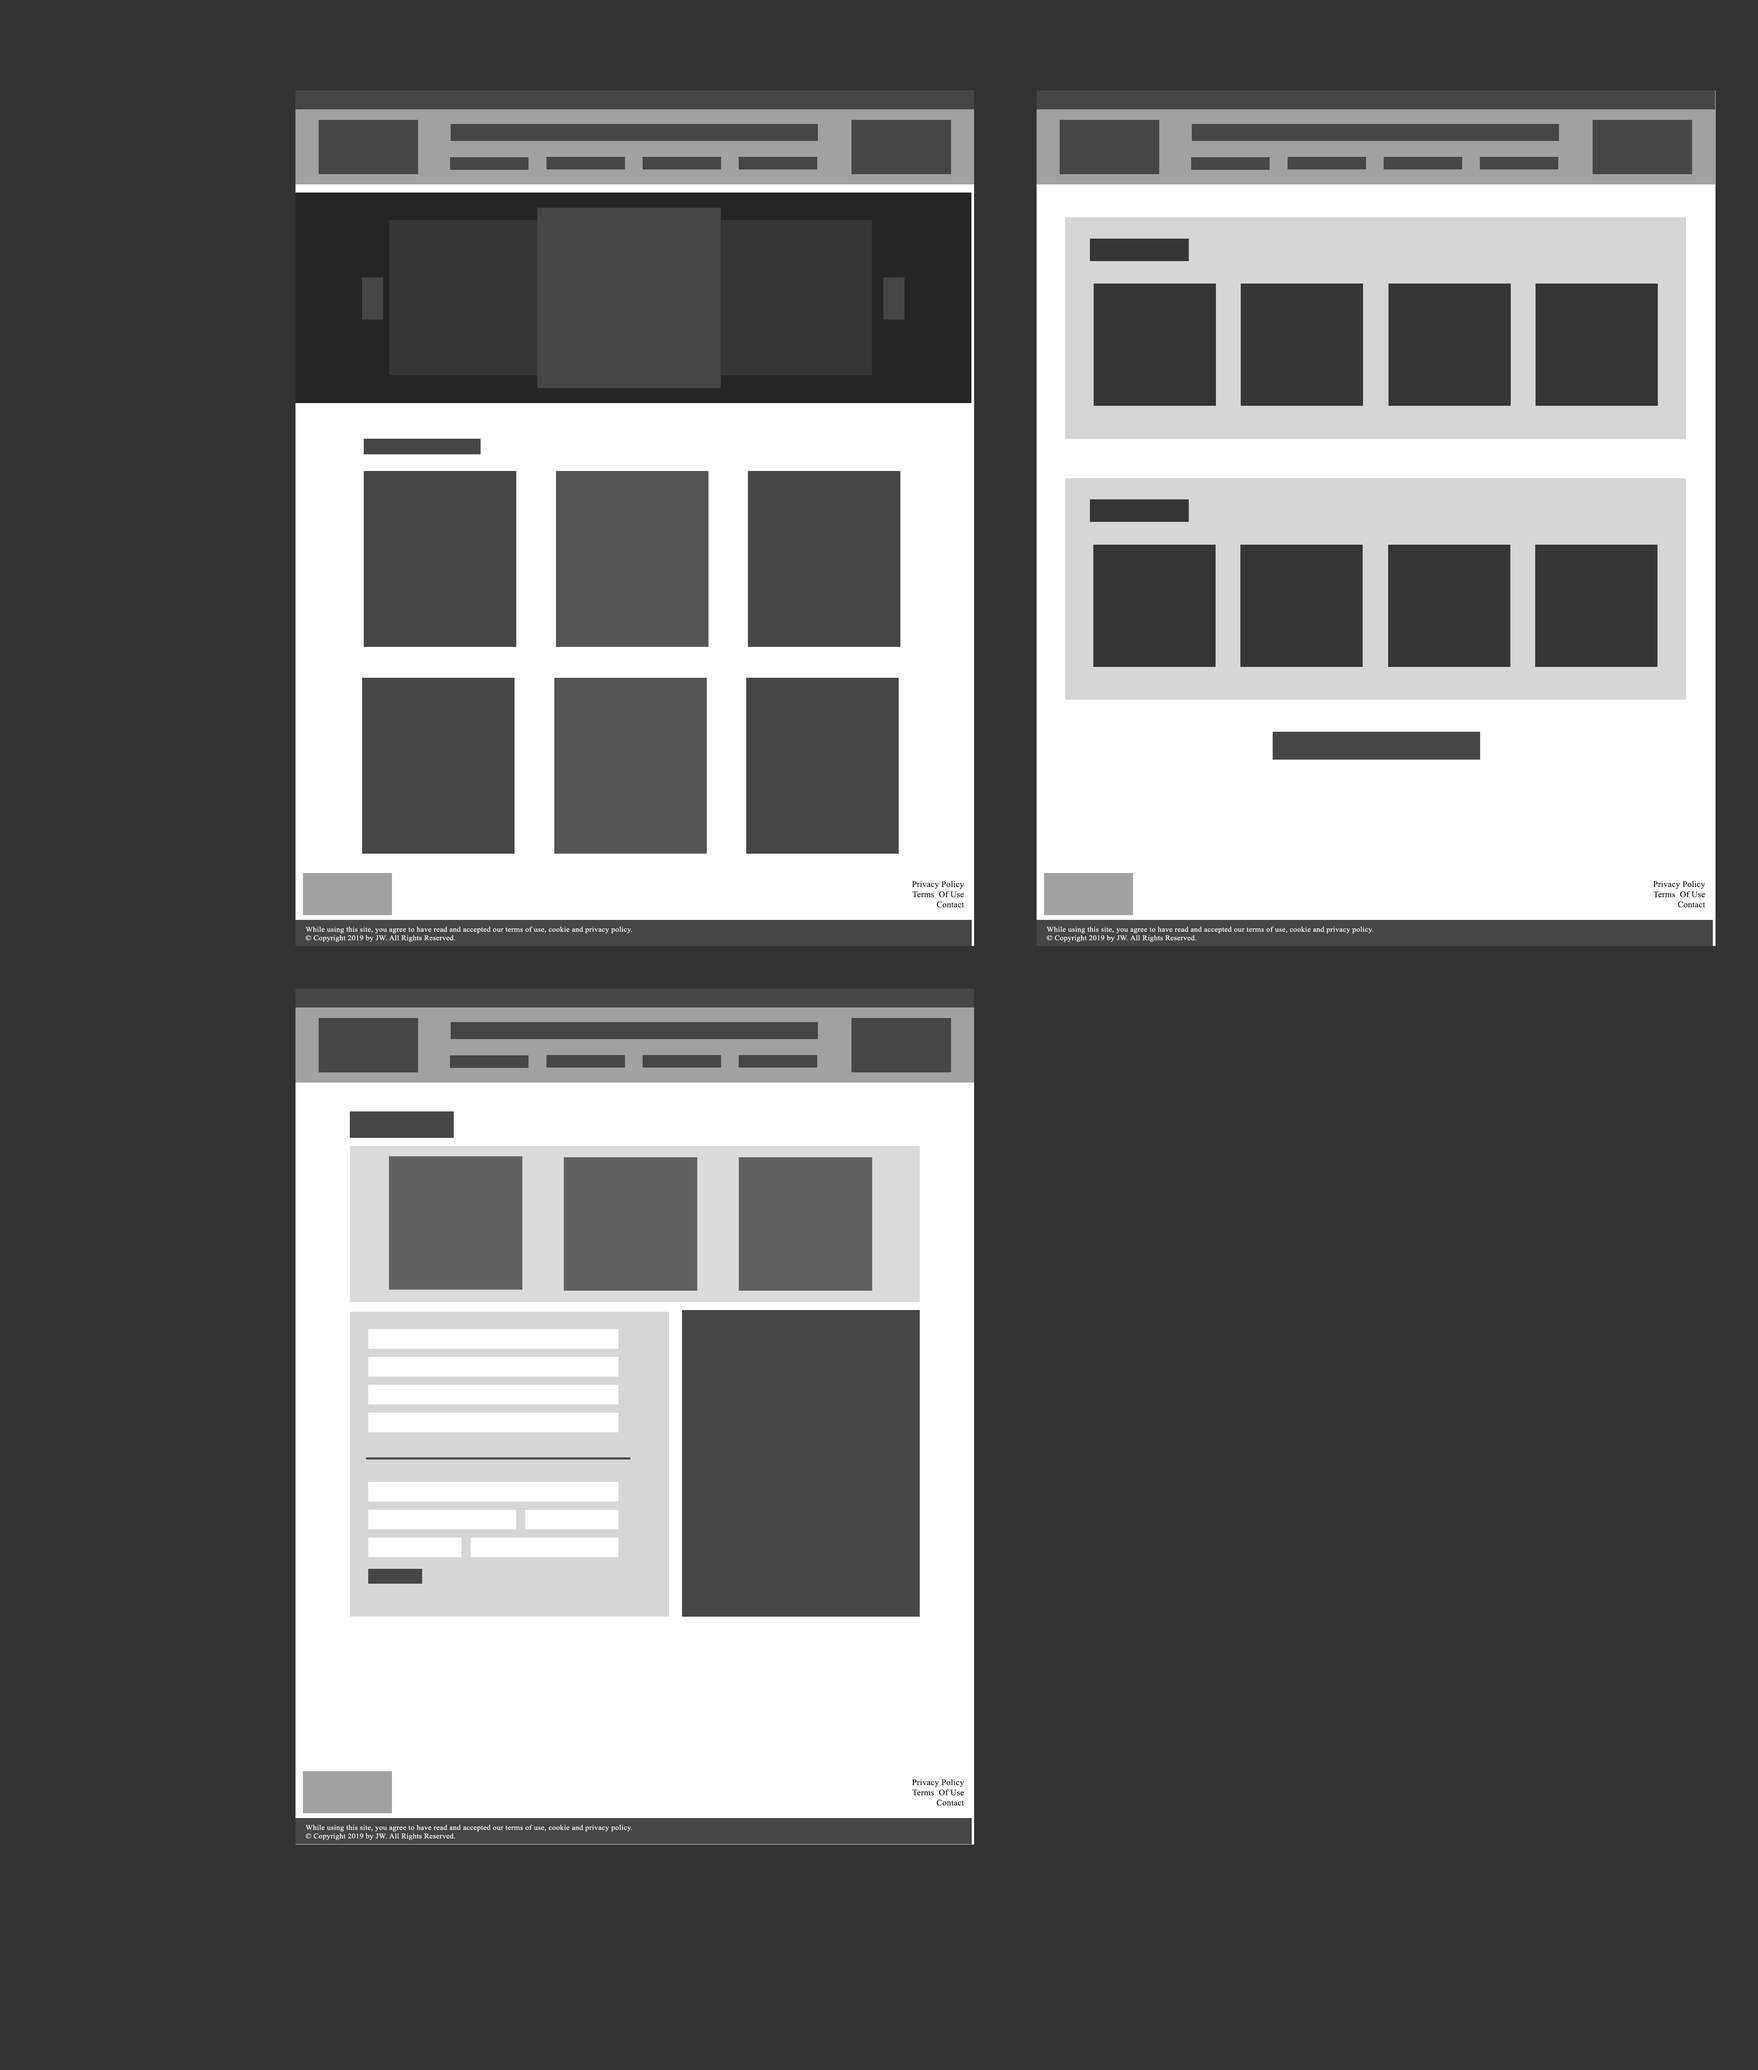
<style>
.page{position:relative;width:1758px;height:2070px;background:#333333}
.page>*{position:absolute;margin:0}
.t1{font:8.5px "TimesNewRomanPSMT";letter-spacing:0.02em;color:#000000}
.t2{font:7.1px "TimesNewRomanPSMT";letter-spacing:0.02em;color:#ffffff;scale:1.07 1}
</style>
<div class="page">
<p class="t1" style="left:912px;top:881px;width:52px;height:27px;text-align:right">Privacy Policy<br>Terms  Of Use<br>Contact</p>
<p class="t1" style="left:1653px;top:881px;width:52px;height:27px;text-align:right">Privacy Policy<br>Terms  Of Use<br>Contact</p>
<p class="t2" style="left:305px;top:927px;width:327px;height:15px">While using this site, you agree to have read and accepted our terms of use, cookie and privacy policy. <br>© Copyright 2019 by JW. All Rights Reserved.</p>
<p class="t2" style="left:1046px;top:927px;width:327px;height:15px">While using this site, you agree to have read and accepted our terms of use, cookie and privacy policy. <br>© Copyright 2019 by JW. All Rights Reserved.</p>
<p class="t1" style="left:912px;top:1779px;width:52px;height:27px;text-align:right">Privacy Policy<br>Terms  Of Use<br>Contact</p>
<p class="t2" style="left:305px;top:1825px;width:327px;height:15px">While using this site, you agree to have read and accepted our terms of use, cookie and privacy policy. <br>© Copyright 2019 by JW. All Rights Reserved.</p>
</div>
